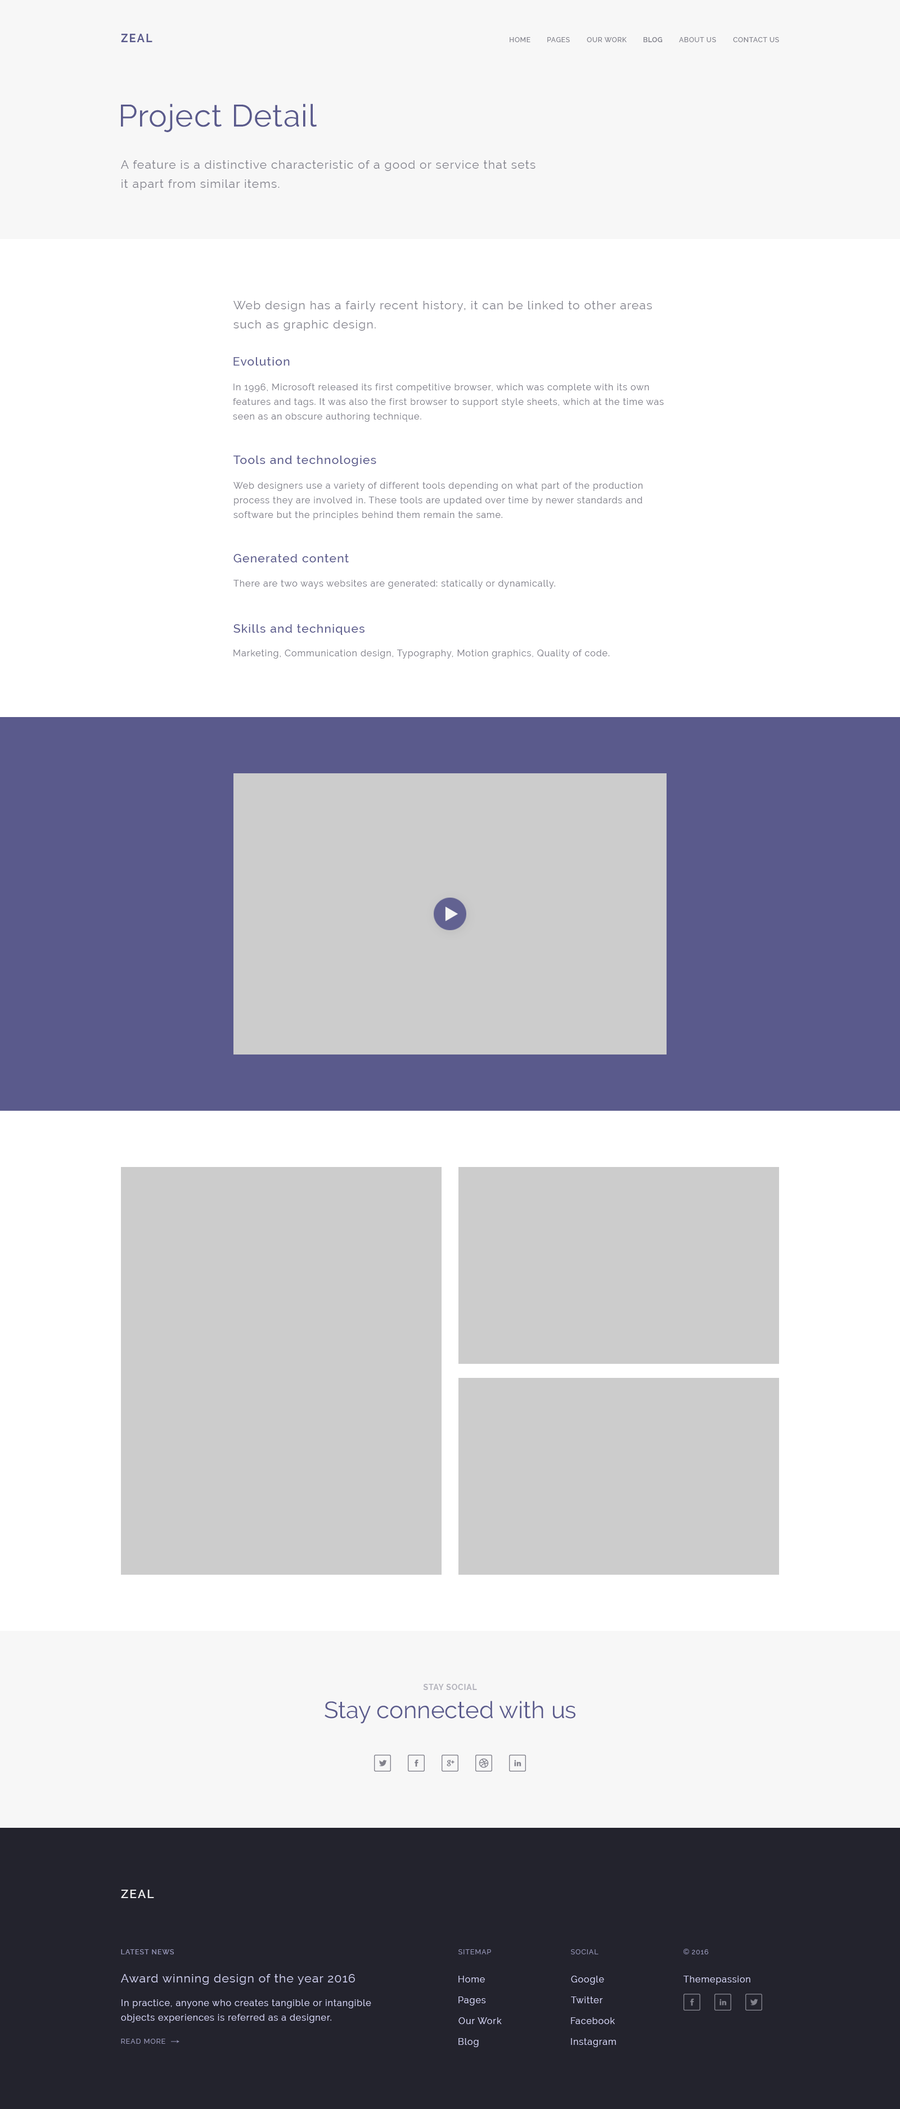
<style>
.page{position:relative;width:900px;height:2109px;background:#ffffff}
.page>*{position:absolute;margin:0}
.t1{font:11.2px "Raleway-Bold";letter-spacing:0.1em;color:#5a5a8c}
.t2{font:6.8px "Raleway-Medium";letter-spacing:0.06em;color:#82828c}
.t3{font:6.8px "Raleway-SemiBold";letter-spacing:0.06em;color:#82828c}
.t4{font:30.9px "Raleway-Regular";letter-spacing:0.02em;color:#5a5a8c}
.t5{font:11.8px/19.1px "Raleway-Regular";letter-spacing:0.06em;color:#82828c}
.t6{font:11.8px "Raleway-Medium";letter-spacing:0.06em;color:#5a5a8c}
.t7{font:9px/14.6px "Raleway-Regular";letter-spacing:0.06em;color:#82828c}
.t8{font:9px "Raleway-Regular";letter-spacing:0.06em;color:#82828c}
.t9{font:7.8px "Raleway-Bold";letter-spacing:0.06em;color:#b3b3bc}
.t10{font:23.5px "Raleway-Regular";color:#5a5a8c}
.t11{font:11.8px "Raleway-SemiBold";letter-spacing:0.1em;color:#eeeeee}
.t12{font:6.8px "Raleway-Medium";letter-spacing:0.1em;color:#9797b8}
.t13{font:6.8px "Raleway-Regular";letter-spacing:0.1em;color:#9797b8}
.t14{font:11.8px "Raleway-Regular";letter-spacing:0.06em;color:#d0d0f0}
.t15{font:9px "Raleway-Regular";letter-spacing:0.06em;color:#d0d0f0}
.t16{font:9px/14.6px "Raleway-Regular";letter-spacing:0.06em;color:#d0d0f0}
</style>
<div class="page">
<p class="t1" style="left:121px;top:34px;width:31px;height:8px">ZEAL</p>
<p class="t2" style="left:510px;top:37px;width:20px;height:5px">HOME</p>
<p class="t2" style="left:547px;top:37px;width:23px;height:5px">PAGES</p>
<p class="t2" style="left:587px;top:37px;width:40px;height:5px">OUR WORK</p>
<p class="t3" style="left:644px;top:37px;width:19px;height:5px">BLOG</p>
<p class="t2" style="left:679px;top:37px;width:37px;height:5px">ABOUT US</p>
<p class="t2" style="left:733px;top:37px;width:46px;height:5px">CONTACT US</p>
<p class="t4" style="left:121px;top:104px;width:196px;height:28px">Project Detail</p>
<p class="t5" style="left:121px;top:160px;width:415px;height:30px;text-align:right">A feature is a distinctive characteristic of a good or service that sets<br>it apart from similar items.</p>
<p class="t5" style="left:233px;top:301px;width:419px;height:30px;text-align:right">Web design has a fairly recent history, it can be linked to other areas<br>such as graphic design.</p>
<p class="t6" style="left:233px;top:357px;width:57px;height:9px">Evolution</p>
<p class="t7" style="left:233px;top:384px;width:431px;height:38px;text-align:right">In 1996, Microsoft released its first competitive browser, which was complete with its own<br>features and tags. It was also the first browser to support style sheets, which at the time was<br>seen as an obscure authoring technique.</p>
<p class="t6" style="left:233px;top:456px;width:143px;height:10px">Tools and technologies</p>
<p class="t7" style="left:233px;top:482px;width:410px;height:38px;text-align:right">Web designers use a variety of different tools depending on what part of the production<br>process they are involved in. These tools are updated over time by newer standards and<br>software but the principles behind them remain the same.</p>
<p class="t6" style="left:233px;top:554px;width:116px;height:8px">Generated content</p>
<p class="t8" style="left:233px;top:580px;width:322px;height:9px">There are two ways websites are generated: statically or dynamically.</p>
<p class="t6" style="left:233px;top:624px;width:131px;height:11px">Skills and techniques</p>
<p class="t8" style="left:233px;top:650px;width:377px;height:9px">Marketing, Communication design, Typography, Motion graphics, Quality of code.</p>
<p class="t9" style="left:423px;top:1684px;width:54px;height:6px">STAY SOCIAL</p>
<p class="t10" style="left:325px;top:1701px;width:250px;height:23px">Stay connected with us</p>
<p class="t11" style="left:121px;top:1890px;width:33px;height:8px">ZEAL</p>
<p class="t12" style="left:121px;top:1950px;width:53px;height:5px">LATEST NEWS</p>
<p class="t13" style="left:458px;top:1950px;width:33px;height:5px">SITEMAP</p>
<p class="t13" style="left:571px;top:1950px;width:27px;height:5px">SOCIAL</p>
<p class="t13" style="left:692px;top:1950px;width:17px;height:5px">2016</p>
<p class="t14" style="left:121px;top:1974px;width:234px;height:11px">Award winning design of the year 2016</p>
<p class="t15" style="left:458px;top:1976px;width:27px;height:7px">Home</p>
<p class="t15" style="left:571px;top:1976px;width:33px;height:9px">Google</p>
<p class="t15" style="left:683px;top:1976px;width:67px;height:9px">Themepassion</p>
<p class="t15" style="left:458px;top:1997px;width:28px;height:9px">Pages</p>
<p class="t15" style="left:571px;top:1997px;width:32px;height:7px">Twitter</p>
<p class="t16" style="left:121px;top:2000px;width:250px;height:23px;text-align:right">In practice, anyone who creates tangible or intangible<br>objects experiences is referred as a designer.</p>
<p class="t15" style="left:458px;top:2018px;width:44px;height:6px">Our Work</p>
<p class="t15" style="left:571px;top:2018px;width:44px;height:6px">Facebook</p>
<p class="t13" style="left:121px;top:2039px;width:44px;height:5px">READ MORE</p>
<p class="t15" style="left:458px;top:2038px;width:21px;height:10px">Blog</p>
<p class="t15" style="left:571px;top:2038px;width:45px;height:10px">Instagram</p>
</div>
